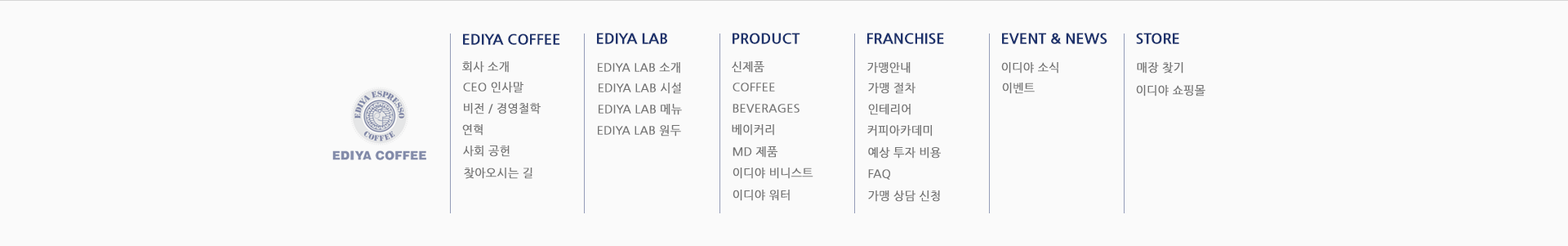
<style>
.page{position:relative;width:1568px;height:246px;background:#fafafa}
.page>*{position:absolute;margin:0}
.t1{font:14.7px "NanumGothicExtraBold";color:#1d326c}
.t2{font:11.4px "NanumGothic";color:#747474;font-weight:bold}
</style>
<div class="page">
<p class="t1" style="left:463px;top:33px;width:97px;height:12px">EDIYA COFFEE</p>
<p class="t1" style="left:597px;top:33px;width:70px;height:11px">EDIYA LAB</p>
<p class="t1" style="left:733px;top:33px;width:67px;height:11px">PRODUCT</p>
<p class="t1" style="left:867px;top:33px;width:77px;height:11px">FRANCHISE</p>
<p class="t1" style="left:1002px;top:33px;width:105px;height:11px">EVENT &amp; NEWS</p>
<p class="t1" style="left:1136px;top:33px;width:43px;height:11px">STORE</p>
<p class="t2" style="left:462px;top:61px;width:47px;height:12px">회사 소개</p>
<p class="t2" style="left:598px;top:62px;width:82px;height:12px">EDIYA LAB 소개</p>
<p class="t2" style="left:732px;top:61px;width:32px;height:12px">신제품</p>
<p class="t2" style="left:867px;top:62px;width:44px;height:12px">가맹안내</p>
<p class="t2" style="left:1001px;top:62px;width:57px;height:12px">이디야 소식</p>
<p class="t2" style="left:1137px;top:62px;width:46px;height:12px">매장 찾기</p>
<p class="t2" style="left:463px;top:82px;width:60px;height:11px">CEO 인사말</p>
<p class="t2" style="left:599px;top:82px;width:82px;height:12px">EDIYA LAB 시설</p>
<p class="t2" style="left:733px;top:82px;width:42px;height:9px">COFFEE</p>
<p class="t2" style="left:868px;top:82px;width:47px;height:12px">가맹 절차</p>
<p class="t2" style="left:1002px;top:82px;width:33px;height:12px">이벤트</p>
<p class="t2" style="left:1136px;top:85px;width:69px;height:11px">이디야 쇼핑몰</p>
<p class="t2" style="left:464px;top:103px;width:77px;height:11px">비전 / 경영철학</p>
<p class="t2" style="left:599px;top:104px;width:83px;height:11px">EDIYA LAB 메뉴</p>
<p class="t2" style="left:733px;top:104px;width:67px;height:9px">BEVERAGES</p>
<p class="t2" style="left:868px;top:104px;width:43px;height:11px">인테리어</p>
<p class="t2" style="left:462px;top:124px;width:21px;height:12px">연혁</p>
<p class="t2" style="left:598px;top:125px;width:83px;height:11px">EDIYA LAB 원두</p>
<p class="t2" style="left:732px;top:124px;width:42px;height:12px">베이커리</p>
<p class="t2" style="left:867px;top:125px;width:65px;height:11px">커피아카데미</p>
<p class="t2" style="left:463px;top:145px;width:47px;height:12px">사회 공헌</p>
<p class="t2" style="left:733px;top:146px;width:44px;height:12px">MD 제품</p>
<p class="t2" style="left:868px;top:147px;width:73px;height:11px">예상 투자 비용</p>
<p class="t2" style="left:464px;top:167px;width:68px;height:12px">찾아오시는 길</p>
<p class="t2" style="left:733px;top:167px;width:80px;height:12px">이디야 비니스트</p>
<p class="t2" style="left:868px;top:169px;width:22px;height:11px">FAQ</p>
<p class="t2" style="left:733px;top:189px;width:57px;height:12px">이디야 워터</p>
<p class="t2" style="left:868px;top:190px;width:72px;height:12px">가맹 상담 신청</p>
</div>
